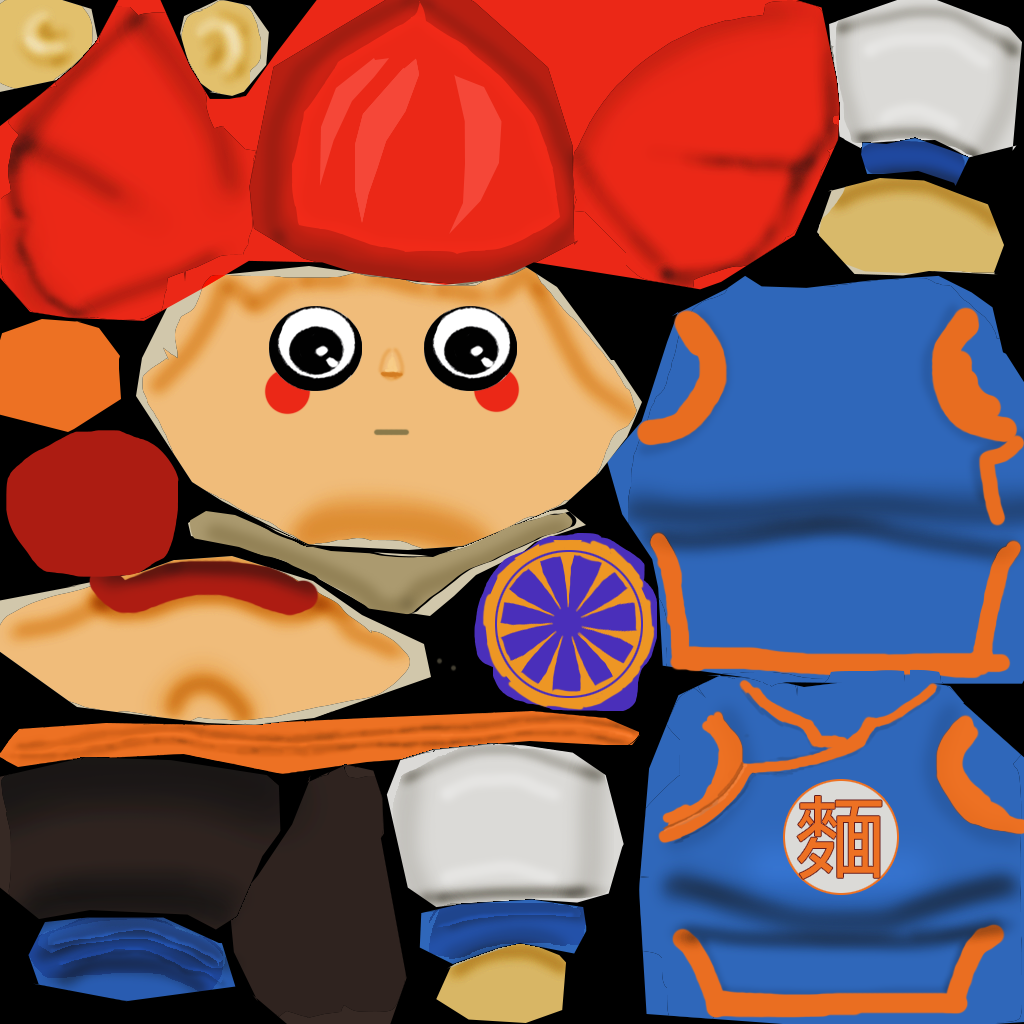
<style>
.page{position:relative;width:1024px;height:1024px}
.page>*{position:absolute;margin:0}
.t1{font:86.3px "MicrosoftYaHei";color:#ed7123}
</style>
<div class="page">
<p class="t1" style="left:797px;top:796px;width:85px;height:83px">麵</p>
</div>
